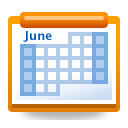
<style>
.page{position:relative;width:128px;height:128px;background:#ffffff}
.page>*{position:absolute;margin:0}
.t1{font:12px "LucidaGrande-Bold";letter-spacing:0.01em;color:#0058b9}
</style>
<div class="page">
<p class="t1" style="left:23px;top:31px;width:29px;height:11px">June</p>
</div>
